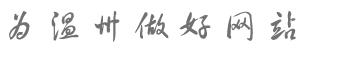
<style>
.page{position:relative;width:350px;height:70px;background:#ffffff}
.page>*{position:absolute;margin:0}
.t1{font:40px "FZHCJW--GB1-0";letter-spacing:0.1em;color:#727171}
</style>
<div class="page">
<p class="t1" style="left:9px;top:11px;width:287px;height:31px">为温州做好网站</p>
</div>
